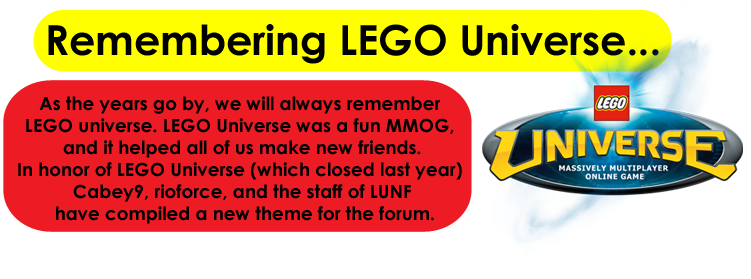
<style>
.page{position:relative;width:751px;height:279px;background:#ffffff}
.page>*{position:absolute;margin:0}
.t1{font:41.1px "CenturyGothic-Bold";color:#000000}
.t2{font:18.3px "CenturyGothic-Bold";color:#000000}
</style>
<div class="page">
<p class="t1" style="left:48px;top:24px;width:611px;height:40px">Remembering LEGO Universe...</p>
<p class="t2" style="left:18px;top:96px;width:444px;height:128px;text-align:center">As the years go by, we will always remember <br>LEGO universe. LEGO Universe was a fun MMOG, <br>and it helped all of us make new friends.<br>In honor of LEGO Universe (which closed last year) <br>Cabey9, rioforce, and the staff of LUNF<br> have compiled a new theme for the forum.</p>
</div>
